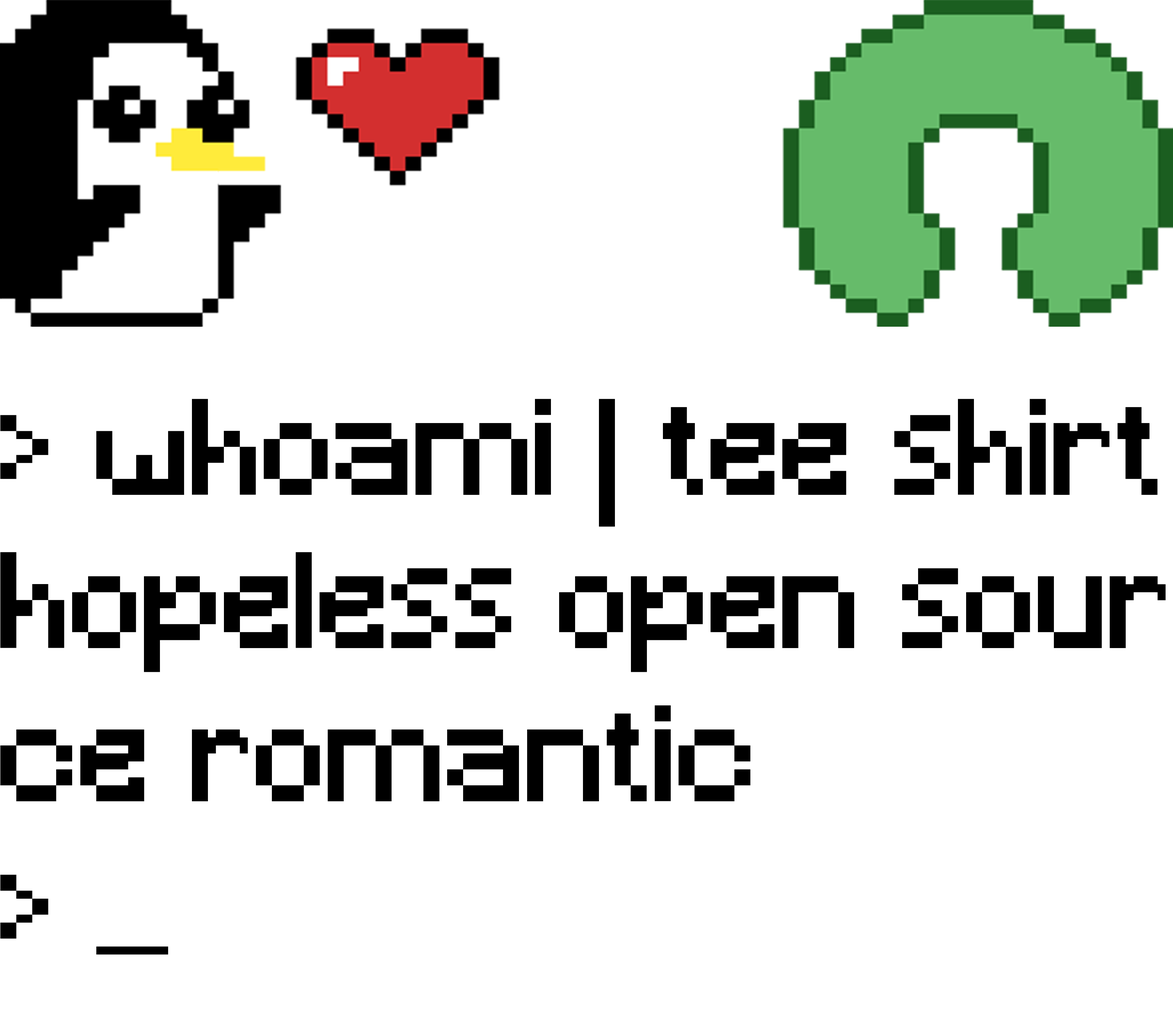
<style>
.page{position:relative;width:1173px;height:1016px;background:#ffffff}
.page>*{position:absolute;margin:0}
.t1{font:127.7px "Minecraft";color:#000000}
</style>
<div class="page">
<p class="t1" style="left:0px;top:399px;width:1166px;height:556px">&gt; whoami | tee shirt<br>hopeless open sour<br>ce romantic<br>&gt; _</p>
</div>
